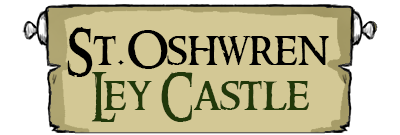
<style>
.page{position:relative;width:400px;height:135px;background:#d3c895}
.page>*{position:absolute;margin:0}
.t1{font:47.6px "RingbearerMedium";color:#000000;scale:0.95 1}
.t2{font:47.6px "RingbearerMedium";color:#21380a;scale:0.95 1}
</style>
<div class="page">
<p class="t1" style="left:67px;top:27px;width:262px;height:50px">St.Oshwren</p>
<p class="t2" style="left:91px;top:72px;width:218px;height:50px">Ley Castle</p>
</div>
